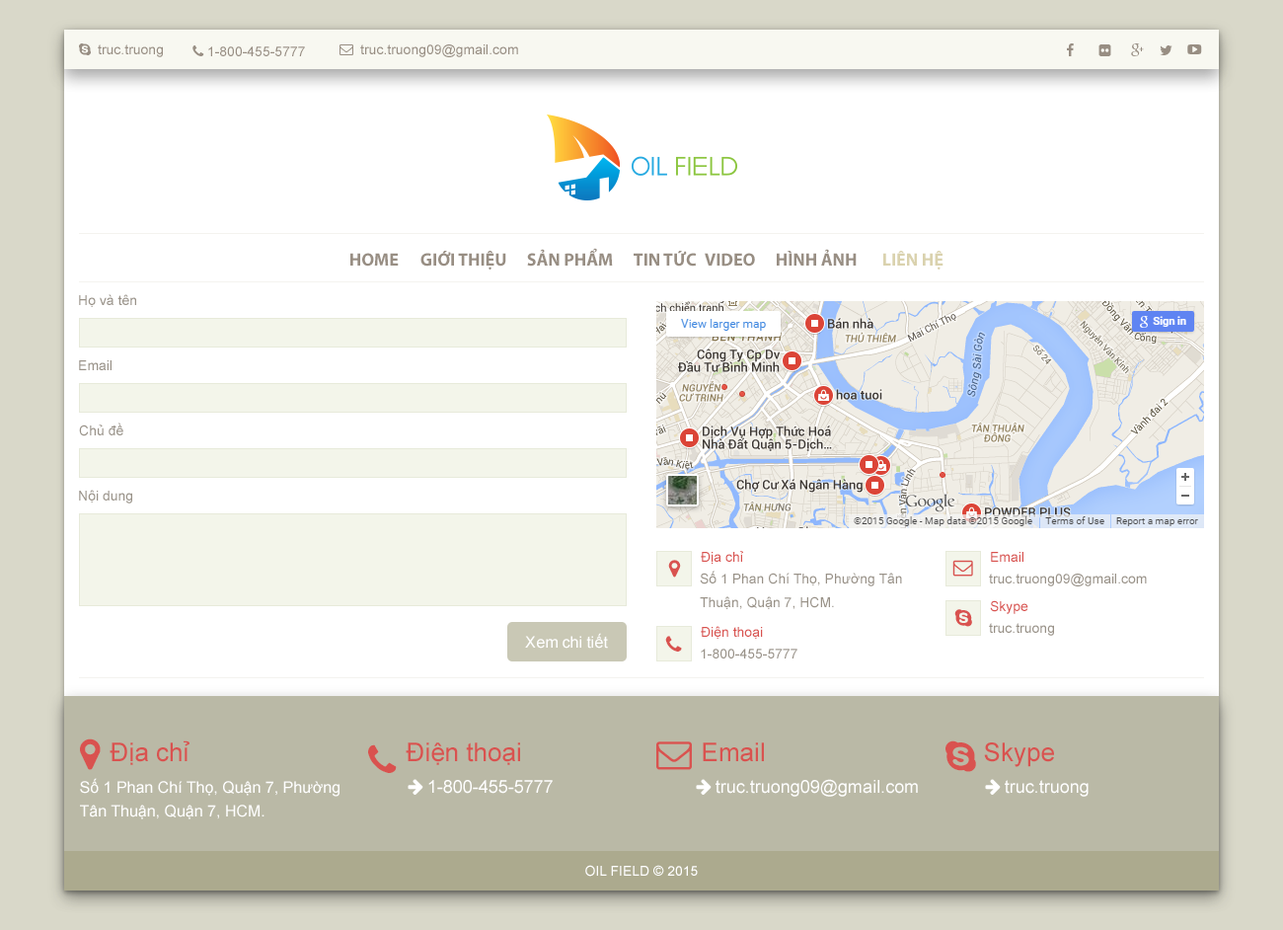
<style>
.page{position:relative;width:1283px;height:930px;background:#ffffff}
.page>*{position:absolute;margin:0}
.t1{font:17.8px "MyriadPro-Bold";color:#988e83}
.t2{font:17.8px "MyriadPro-Bold";color:#dad2ae}
.t3{font:13.8px "ArialMT";color:#999288}
.t4{font:13.8px "ArialMT";color:#d9524f}
.t5{font:13.8px/23.7px "ArialMT";color:#999288}
.t6{font:15.8px "ArialMT";color:#ffffff}
.t7{font:25.7px "ArialMT";color:#d9524f}
.t8{font:15.8px/23.7px "ArialMT";color:#ffffff}
.t9{font:13.8px "ArialMT";color:#ffffff}
</style>
<div class="page">
<p class="t1" style="left:350px;top:248px;width:593px;height:21px">HOME GIỚI THIỆU SẢN PHẨM TIN TỨC VIDEO HÌNH ẢNH <span class="t2">LIÊN HỆ</span></p>
<p class="t3" style="left:79px;top:294px;width:57px;height:13px">Họ và tên</p>
<p class="t3" style="left:79px;top:360px;width:33px;height:10px">Email</p>
<p class="t3" style="left:79px;top:422px;width:44px;height:14px">Chủ đề</p>
<p class="t3" style="left:79px;top:489px;width:53px;height:14px">Nội dung</p>
<p class="t4" style="left:701px;top:551px;width:42px;height:12px">Địa chỉ</p>
<p class="t4" style="left:991px;top:552px;width:32px;height:9px">Email</p>
<p class="t5" style="left:700px;top:570px;width:202px;height:39px">Số 1 Phan Chí Thọ, Phường Tân <br>Thuận, Quận 7, HCM.</p>
<p class="t3" style="left:989px;top:573px;width:158px;height:13px">truc.truong09@gmail.com</p>
<p class="t4" style="left:990px;top:600px;width:38px;height:14px">Skype</p>
<p class="t4" style="left:701px;top:626px;width:62px;height:12px">Điện thoại</p>
<p class="t3" style="left:989px;top:623px;width:65px;height:12px">truc.truong</p>
<p class="t6" style="left:525px;top:633px;width:83px;height:15px">Xem chi tiết</p>
<p class="t3" style="left:701px;top:648px;width:96px;height:10px">1-800-455-5777</p>
<p class="t7" style="left:110px;top:740px;width:79px;height:25px">Địa chỉ</p>
<p class="t7" style="left:406px;top:742px;width:114px;height:23px">Điện thoại</p>
<p class="t7" style="left:703px;top:742px;width:61px;height:20px">Email</p>
<p class="t7" style="left:984px;top:742px;width:70px;height:25px">Skype</p>
<p class="t8" style="left:80px;top:778px;width:259px;height:41px">Số 1 Phan Chí Thọ, Quận 7, Phường<br>Tân Thuận, Quận 7, HCM.</p>
<p class="t9" style="left:585px;top:864px;width:113px;height:12px">OIL FIELD © 2015</p>
</div>
